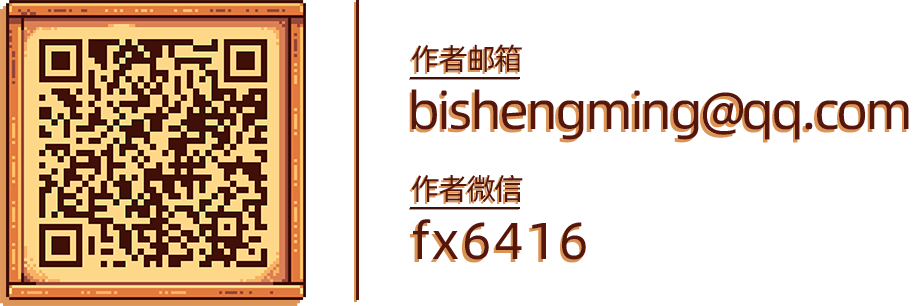
<style>
.page{position:relative;width:913px;height:306px;background:#ffffff}
.page>*{position:absolute;margin:0}
.t1{font:30px "AlibabaPuHuiTi-Regular";letter-spacing:-0.06em;color:#dd9454}
.t2{font:30px "AlibabaPuHuiTi-Regular";letter-spacing:-0.06em;color:#56160c}
.t3{font:52px "AlibabaPuHuiTi-Regular";letter-spacing:-0.06em;color:#56160c}
.t4{font:52px "AlibabaPuHuiTi-Regular";letter-spacing:-0.06em}
.t5{font:52px "AlibabaPuHuiTi-Regular";letter-spacing:0.05em}
.t6{font:52px "AlibabaPuHuiTi-Regular";letter-spacing:0.05em;color:#56160c}
</style>
<div class="page">
<p class="t1" style="left:409px;top:46px;width:111px;height:28px">作者邮箱</p>
<p class="t2" style="left:411px;top:44px;width:111px;height:28px">作者邮箱</p>
<p class="t3" style="left:411px;top:89px;width:498px;height:51px">bishengming@qq.com</p>
<p class="t4" style="left:409px;top:92px;width:498px;height:51px">bishengming@qq.com</p>
<p class="t1" style="left:409px;top:177px;width:112px;height:27px">作者微信</p>
<p class="t2" style="left:411px;top:175px;width:112px;height:27px">作者微信</p>
<p class="t5" style="left:410px;top:222px;width:174px;height:41px">fx6416</p>
<p class="t6" style="left:413px;top:219px;width:173px;height:41px">fx6416</p>
</div>
